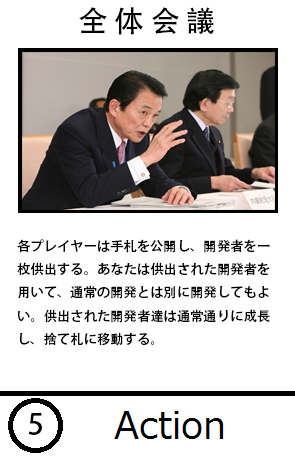
<style>
.page{position:relative;width:295px;height:460px;background:#ffffff}
.page>*{position:absolute;margin:0}
.t1{font:29.3px "AdobeHeitiStd-Regular";color:#000000}
.t2{font:13.3px "AdobeHeitiStd-Regular";color:#000000}
</style>
<div class="page">
<p class="t1" style="left:79px;top:7px;width:135px;height:28px">全 体 会 議</p>
<p class="t2" style="left:17px;top:239px;width:253px;height:107px">各プレイヤーは手札を公開し、開発者を一枚供出する。あなたは供出された開発者を用いて、通常の開発とは別に開発してもよい。供出された開発者達は通常通りに成長し、捨て札に移動する。</p>
<p class="t1" style="left:28px;top:413px;width:14px;height:22px">5</p>
</div>
